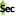
<style>
.page{position:relative;width:16px;height:16px;background:#ffffff}
.page>*{position:absolute;margin:0}
.t1{font:10px "Lato-Bold";color:#000000}
</style>
<div class="page">
<p class="t1" style="left:0px;top:4px;width:15px;height:9px">Sec</p>
</div>
